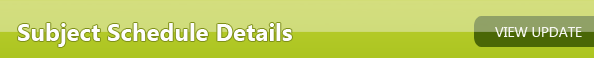
<style>
.page{position:relative;width:594px;height:58px}
.page>*{position:absolute;margin:0}
.t1{font:24px "SegoeUI-Bold";color:#fefefe}
.t2{font:14px "SegoeUI";color:#f6f7f1}
</style>
<div class="page">
<p class="t1" style="left:18px;top:23px;width:274px;height:24px">Subject Schedule Details</p>
<p class="t2" style="left:495px;top:27px;width:87px;height:10px">VIEW UPDATE</p>
</div>
